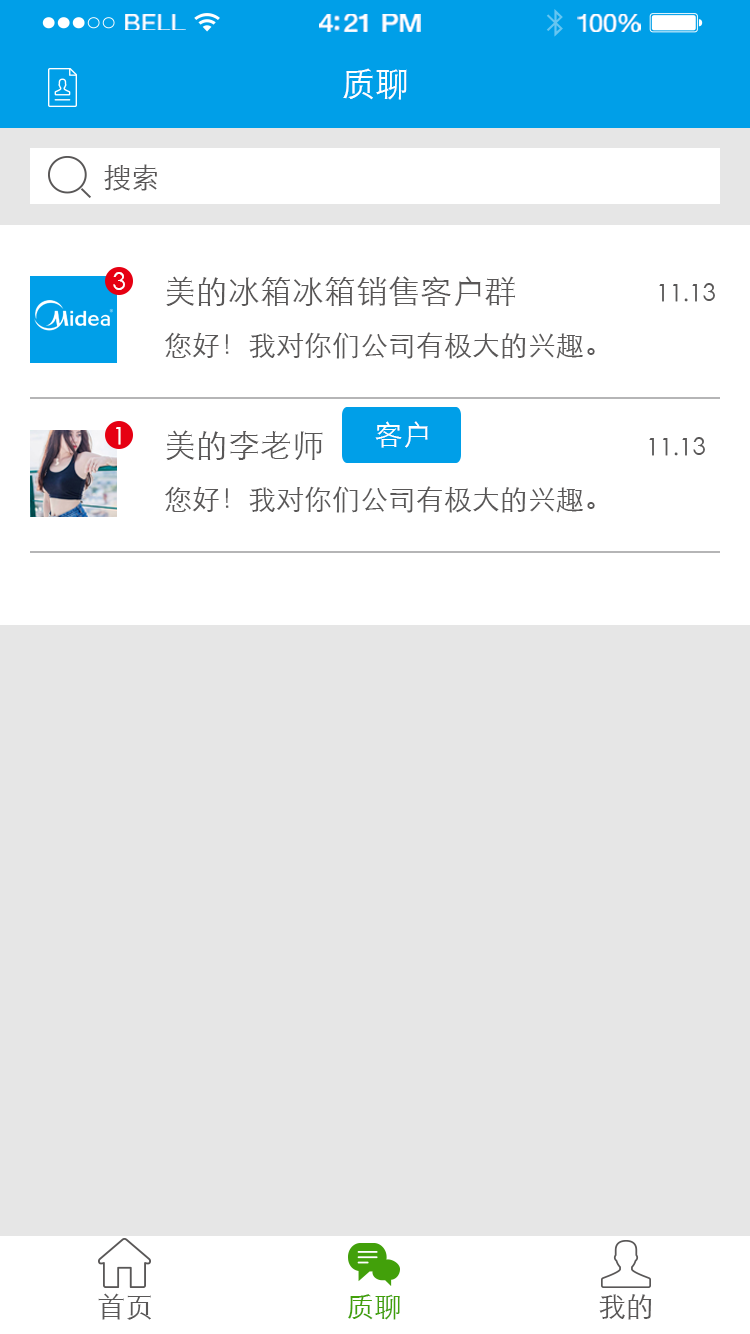
<style>
.page{position:relative;width:750px;height:1334px;background:#e6e6e6}
.page>*{position:absolute;margin:0}
.t1{font:23.3px "HelveticaNeue";letter-spacing:0.02em;color:#ffffff;scale:1.06 1}
.t2{font:25.3px "HelveticaNeue-Medium";letter-spacing:-0.02em;color:#ffffff;scale:1.06 1}
.t3{font:24.3px "HelveticaNeue";letter-spacing:-0.02em;color:#ffffff;scale:1.06 1}
.t4{font:34px "STXihei";color:#ffffff}
.t5{font:28px "STXihei";color:#595757}
.t6{font:24px "STXihei";color:#ffffff}
.t7{font:28px/56px "STXihei";color:#595757}
.t8{font:32px/56px "STXihei";color:#595757}
.t9{font:24px/56px "STXihei";color:#595757}
.t10{font:28px "STXihei";color:#ffffff}
.t11{font:28px "STXihei";color:#42a00a}
</style>
<div class="page">
<p class="t1" style="left:125px;top:14px;width:61px;height:16px">BELL</p>
<p class="t2" style="left:319px;top:14px;width:102px;height:18px">4:21 PM</p>
<p class="t3" style="left:577px;top:14px;width:64px;height:18px">100%</p>
<p class="t4" style="left:343px;top:68px;width:64px;height:32px">质聊</p>
<p class="t5" style="left:104px;top:164px;width:53px;height:27px">搜索</p>
<p class="t6" style="left:113px;top:272px;width:12px;height:18px">3</p>
<p class="t7" style="left:165px;top:276px;width:550px;height:83px"><span class="t8">美的冰箱冰箱销售客户群                    </span><span class="t9">11.13</span><br>您好！我对你们公司有极大的兴趣。</p>
<p class="t10" style="left:375px;top:421px;width:53px;height:27px">客户</p>
<p class="t6" style="left:116px;top:427px;width:5px;height:18px">1</p>
<p class="t7" style="left:165px;top:430px;width:540px;height:83px"><span class="t8">美的李老师                                              </span><span class="t9">11.13</span><br>您好！我对你们公司有极大的兴趣。</p>
<p class="t5" style="left:98px;top:1293px;width:53px;height:27px">首页</p>
<p class="t11" style="left:348px;top:1294px;width:52px;height:26px">质聊</p>
<p class="t5" style="left:599px;top:1294px;width:53px;height:26px">我的</p>
</div>
